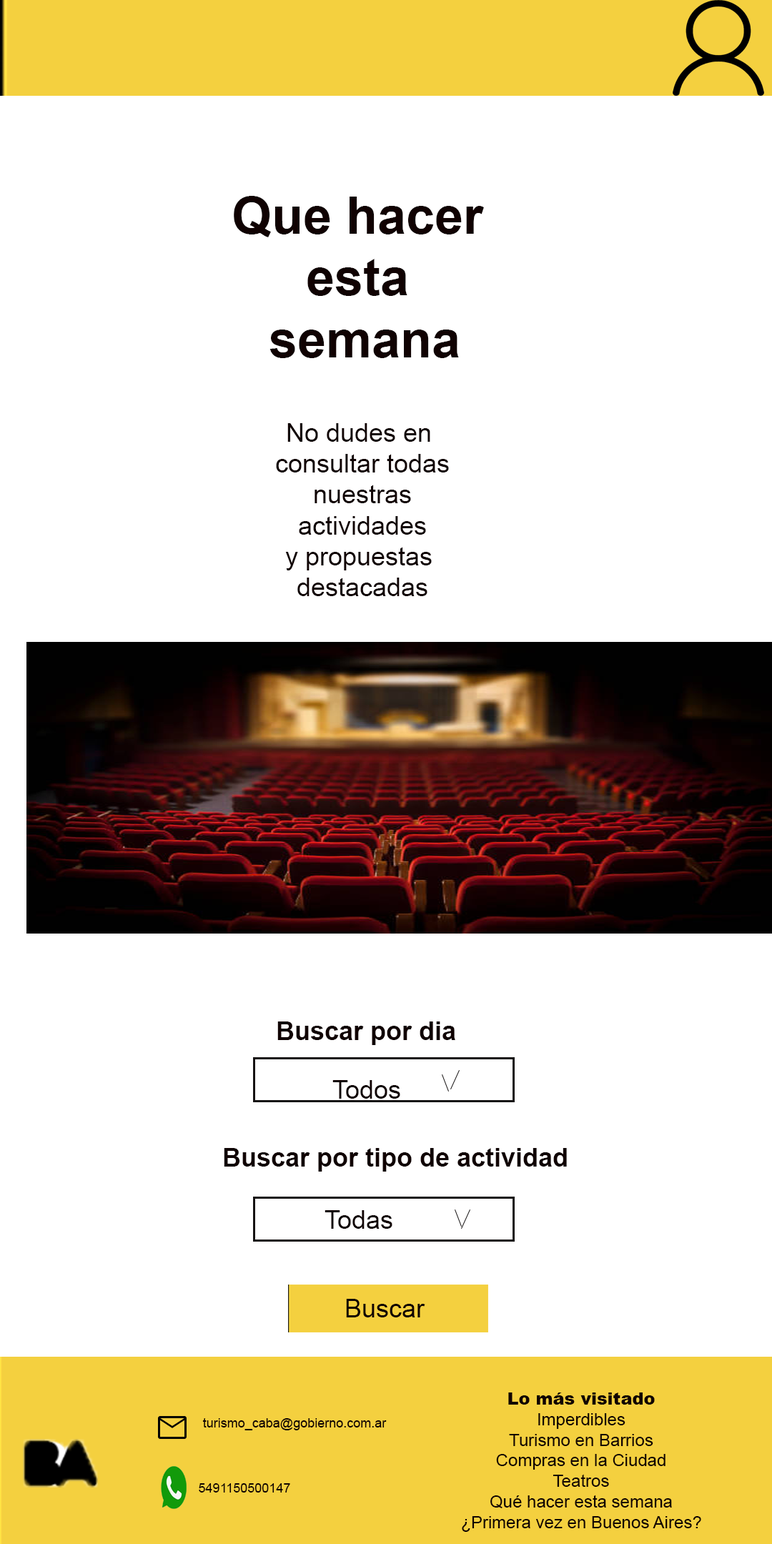
<style>
.page{position:relative;width:772px;height:1544px;background:#ffffff}
.page>*{position:absolute;margin:0}
.t1{font:51.5px "Arial-BoldMT";color:#100202}
.t2{font:25.7px "ArialMT";color:#100202}
.t3{font:25.7px "Arial-BoldMT";color:#100202}
.t4{font:17.2px "ArialMT";color:#100202}
.t5{font:17.2px "Arial-Black";color:#100202}
.t6{font:12.9px "ArialMT";color:#100202}
</style>
<div class="page">
<p class="t1" style="left:234px;top:196px;width:250px;height:162px;text-align:center">Que hacer <br>esta <br>semana</p>
<p class="t2" style="left:276px;top:423px;width:173px;height:173px;text-align:center">No dudes en<br> consultar todas<br> nuestras<br> actividades<br>y propuestas<br> destacadas</p>
<p class="t3" style="left:277px;top:1022px;width:178px;height:23px">Buscar por dia</p>
<p class="t2" style="left:332px;top:1080px;width:68px;height:19px">Todos</p>
<p class="t3" style="left:224px;top:1148px;width:343px;height:24px">Buscar por tipo de actividad</p>
<p class="t2" style="left:325px;top:1210px;width:68px;height:19px">Todas</p>
<p class="t2" style="left:346px;top:1299px;width:79px;height:19px">Buscar</p>
<p class="t4" style="left:462px;top:1393px;width:239px;height:139px;text-align:center"><span class="t5">Lo más visitado<br></span>Imperdibles<br>Turismo en Barrios<br>Compras en la Ciudad<br>Teatros<br>Qué hacer esta semana<br>¿Primera vez en Buenos Aires?</p>
<p class="t6" style="left:202px;top:1418px;width:185px;height:13px">turismo_caba@gobierno.com.ar</p>
<p class="t6" style="left:199px;top:1484px;width:91px;height:9px">5491150500147</p>
</div>
